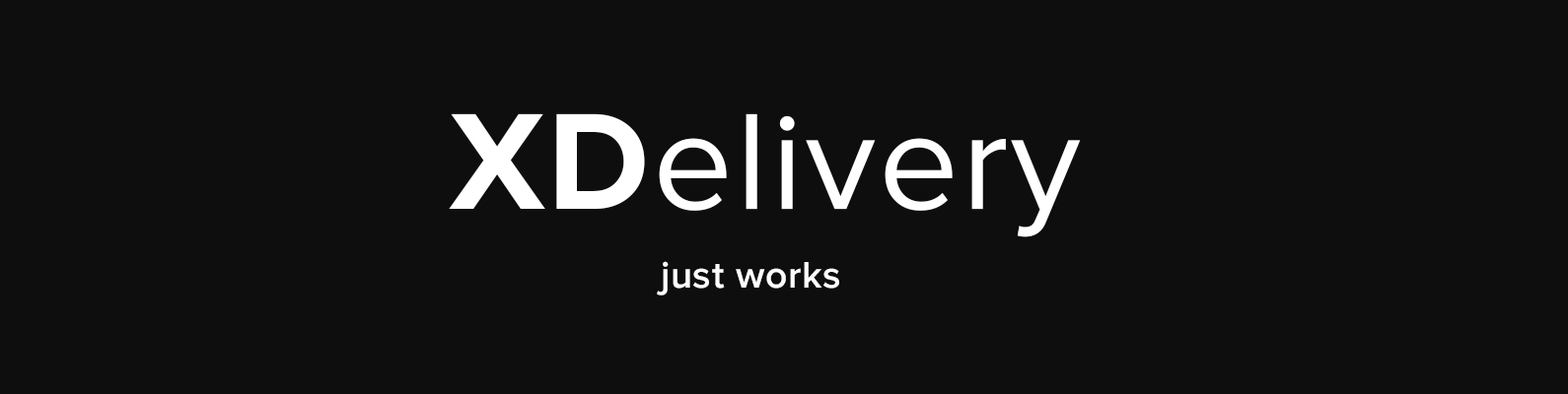
<style>
.page{position:relative;width:1568px;height:394px;background:#0f0e0e}
.page>*{position:absolute;margin:0}
.t1{font:142.5px "ProximaNova-Regular";letter-spacing:0.02em;color:#ffffff}
.t2{font:142.5px "ProximaNova-Bold";letter-spacing:0.02em;color:#ffffff}
.t3{font:38.4px "ProximaNova-Semibold";letter-spacing:0.02em;color:#ffffff}
</style>
<div class="page">
<p class="t1" style="left:449px;top:113px;width:632px;height:125px"><span class="t2">XD</span>elivery</p>
<p class="t3" style="left:657px;top:261px;width:182px;height:35px">just works</p>
</div>
